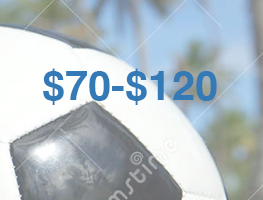
<style>
.page{position:relative;width:263px;height:200px}
.page>*{position:absolute;margin:0}
.t1{font:41.7px "Helvetica-Bold";color:#337ab7}
</style>
<div class="page">
<p class="t1" style="left:43px;top:68px;width:174px;height:37px">$70-$120</p>
</div>
